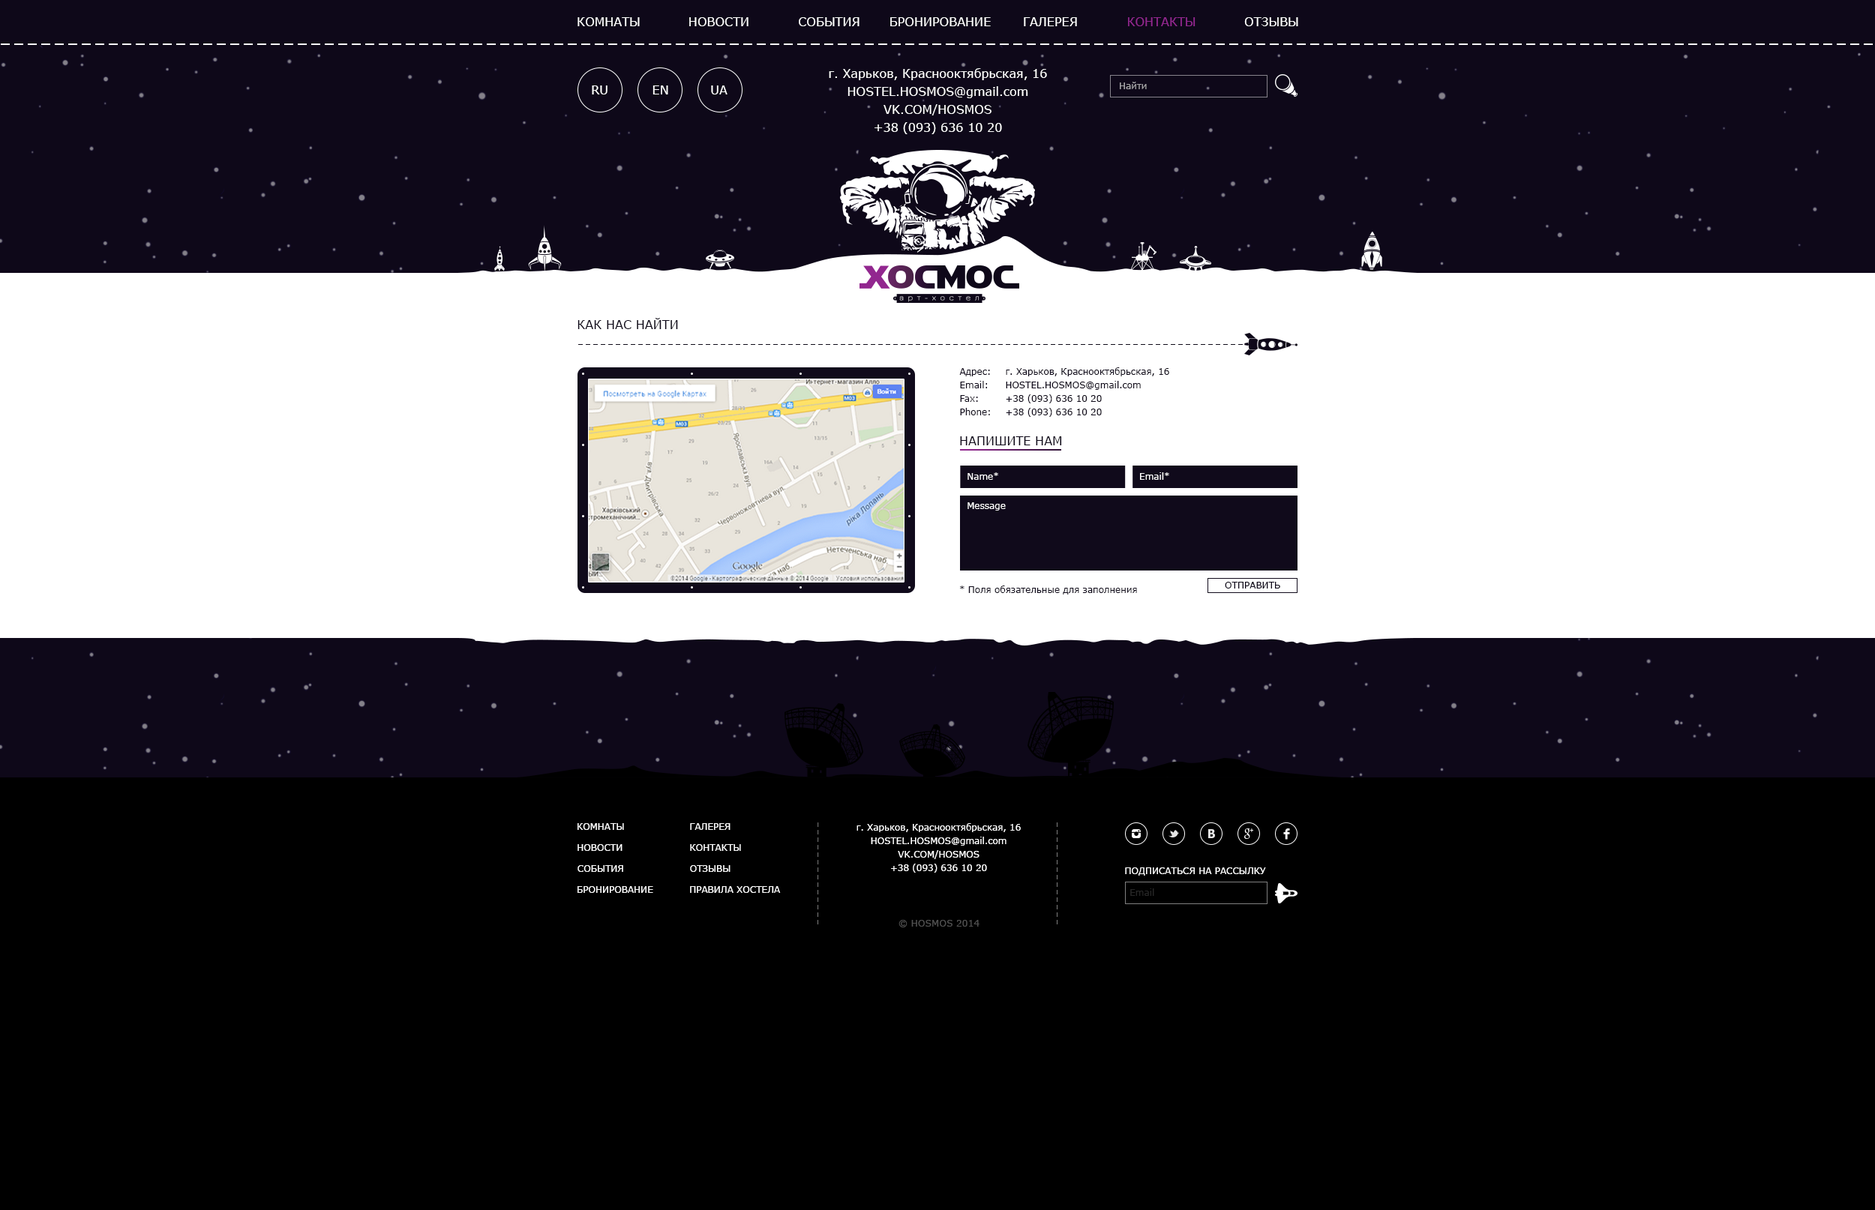
<style>
.page{position:relative;width:1875px;height:1210px;background:#000000}
.page>*{position:absolute;margin:0}
.t1{font:12px "Verdana";color:#ffffff}
.t2{font:12px "Verdana";color:#92278f}
.t3{font:12px/18px "Verdana";color:#ffffff}
.t4{font:9px "Verdana";color:#a6a5a8}
.t5{font:12px "Verdana";color:#0e0819;text-transform:uppercase}
.t6{font:9px/13.5px "Verdana";color:#100a1b}
.t7{font:9px "Verdana";color:#ffffff}
.t8{font:9.4px "Verdana";color:#100a1b;text-transform:uppercase;scale:0.95 1}
.t9{font:9.2px "Verdana";color:#100a1b}
.t10{font:9px/13.5px "Verdana";color:#ffffff}
.t11{font:9px "Verdana";color:#282828}
.t12{font:9px "Verdana";color:#505050}
</style>
<div class="page">
<p class="t1" style="left:577px;top:17px;width:63px;height:9px">КОМНАТЫ</p>
<p class="t1" style="left:689px;top:17px;width:59px;height:9px">НОВОСТИ</p>
<p class="t1" style="left:799px;top:17px;width:60px;height:9px">СОБЫТИЯ</p>
<p class="t1" style="left:890px;top:17px;width:101px;height:9px">БРОНИРОВАНИЕ</p>
<p class="t1" style="left:1024px;top:17px;width:53px;height:9px">ГАЛЕРЕЯ</p>
<p class="t2" style="left:1128px;top:17px;width:67px;height:9px">КОНТАКТЫ</p>
<p class="t1" style="left:1244px;top:17px;width:54px;height:9px">ОТЗЫВЫ</p>
<p class="t3" style="left:829px;top:68px;width:218px;height:66px;text-align:center">г. Харьков, Краснооктябрьская, 16<br>HOSTEL.HOSMOS@gmail.com<br>VK.COM/HOSMOS<br>+38 (093) 636 10 20</p>
<p class="t1" style="left:592px;top:85px;width:15px;height:9px">RU</p>
<p class="t1" style="left:652px;top:85px;width:16px;height:9px">EN</p>
<p class="t1" style="left:711px;top:85px;width:16px;height:9px">UA</p>
<p class="t4" style="left:1120px;top:82px;width:27px;height:7px">Найти</p>
<p class="t5" style="left:577px;top:318px;width:101px;height:11px">Как нас найти</p>
<p class="t6" style="left:959px;top:368px;width:31px;height:47px">Адрес:<br>Email:<br>Fax:<br>Phone:</p>
<p class="t6" style="left:1006px;top:367px;width:163px;height:50px">г. Харьков, Краснооктябрьская, 16<br>HOSTEL.HOSMOS@gmail.com<br>+38 (093) 636 10 20<br>+38 (093) 636 10 20</p>
<p class="t5" style="left:960px;top:436px;width:102px;height:9px">Напишите нам</p>
<p class="t7" style="left:967px;top:472px;width:31px;height:8px">Name*</p>
<p class="t7" style="left:1140px;top:472px;width:29px;height:8px">Email*</p>
<p class="t7" style="left:967px;top:502px;width:39px;height:9px">Message</p>
<p class="t8" style="left:1225px;top:582px;width:55px;height:7px">Отправить</p>
<p class="t9" style="left:960px;top:586px;width:177px;height:9px">* Поля обязательные для заполнения</p>
<p class="t7" style="left:577px;top:823px;width:47px;height:7px">КОМНАТЫ</p>
<p class="t7" style="left:690px;top:823px;width:40px;height:7px">ГАЛЕРЕЯ</p>
<p class="t10" style="left:856px;top:823px;width:165px;height:50px;text-align:center">г. Харьков, Краснооктябрьская, 16<br>HOSTEL.HOSMOS@gmail.com<br>VK.COM/HOSMOS<br>+38 (093) 636 10 20</p>
<p class="t7" style="left:577px;top:844px;width:45px;height:7px">НОВОСТИ</p>
<p class="t7" style="left:690px;top:844px;width:51px;height:7px">КОНТАКТЫ</p>
<p class="t7" style="left:577px;top:865px;width:46px;height:7px">СОБЫТИЯ</p>
<p class="t7" style="left:690px;top:865px;width:40px;height:7px">ОТЗЫВЫ</p>
<p class="t7" style="left:1125px;top:868px;width:141px;height:8px">ПОДПИСАТЬСЯ НА РАССЫЛКУ</p>
<p class="t7" style="left:577px;top:886px;width:76px;height:7px">БРОНИРОВАНИЕ</p>
<p class="t7" style="left:690px;top:886px;width:91px;height:7px">ПРАВИЛА ХОСТЕЛА</p>
<p class="t11" style="left:1130px;top:889px;width:24px;height:7px">Email</p>
<p class="t12" style="left:898px;top:920px;width:81px;height:8px">© HOSMOS 2014</p>
</div>
